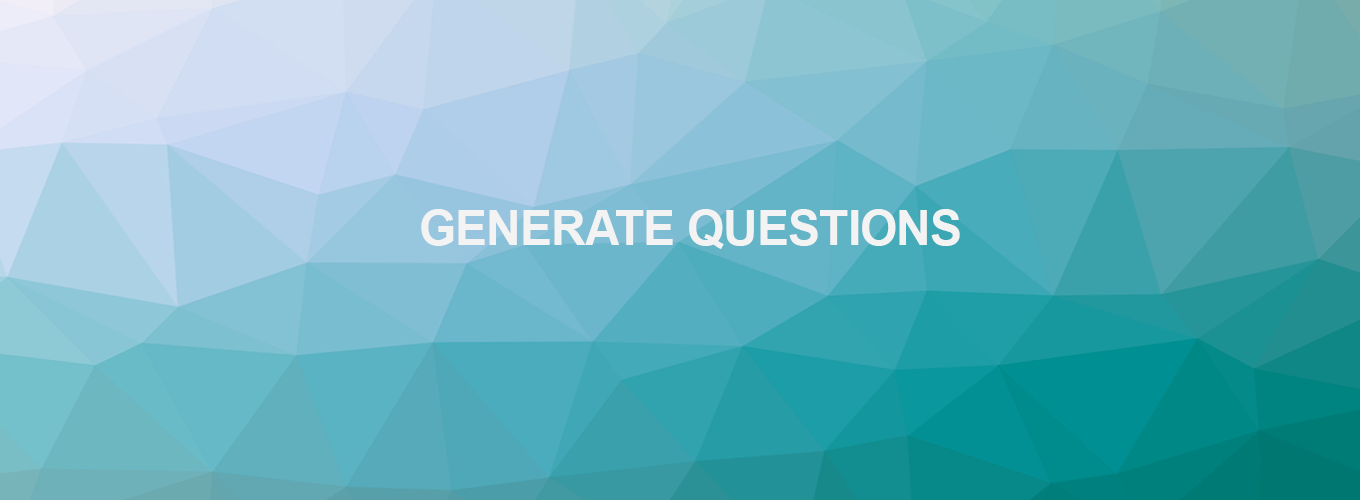
<style>
.page{position:relative;width:1360px;height:500px}
.page>*{position:absolute;margin:0}
.t1{font:47.9px "Arial-BoldMT";letter-spacing:-0.02em;color:#f3f3f3}
</style>
<div class="page">
<p class="t1" style="left:421px;top:209px;width:539px;height:40px">GENERATE QUESTIONS</p>
</div>
